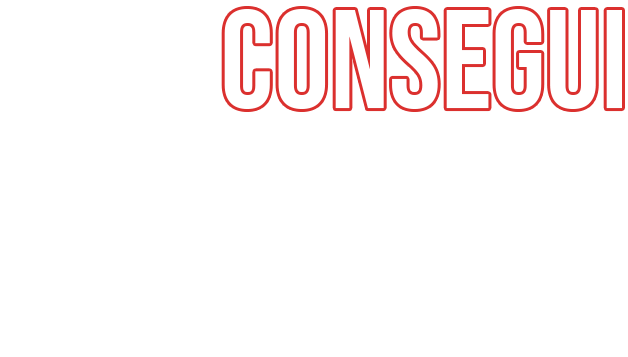
<style>
.page{position:relative;width:628px;height:357px;background:#ffffff}
.page>*{position:absolute;margin:0}
.t1{font:139px "BebasNeue-Regular";color:#db302e}
</style>
<div class="page">
<p class="t1" style="left:224px;top:9px;width:398px;height:100px">CONSEGUI</p>
</div>
